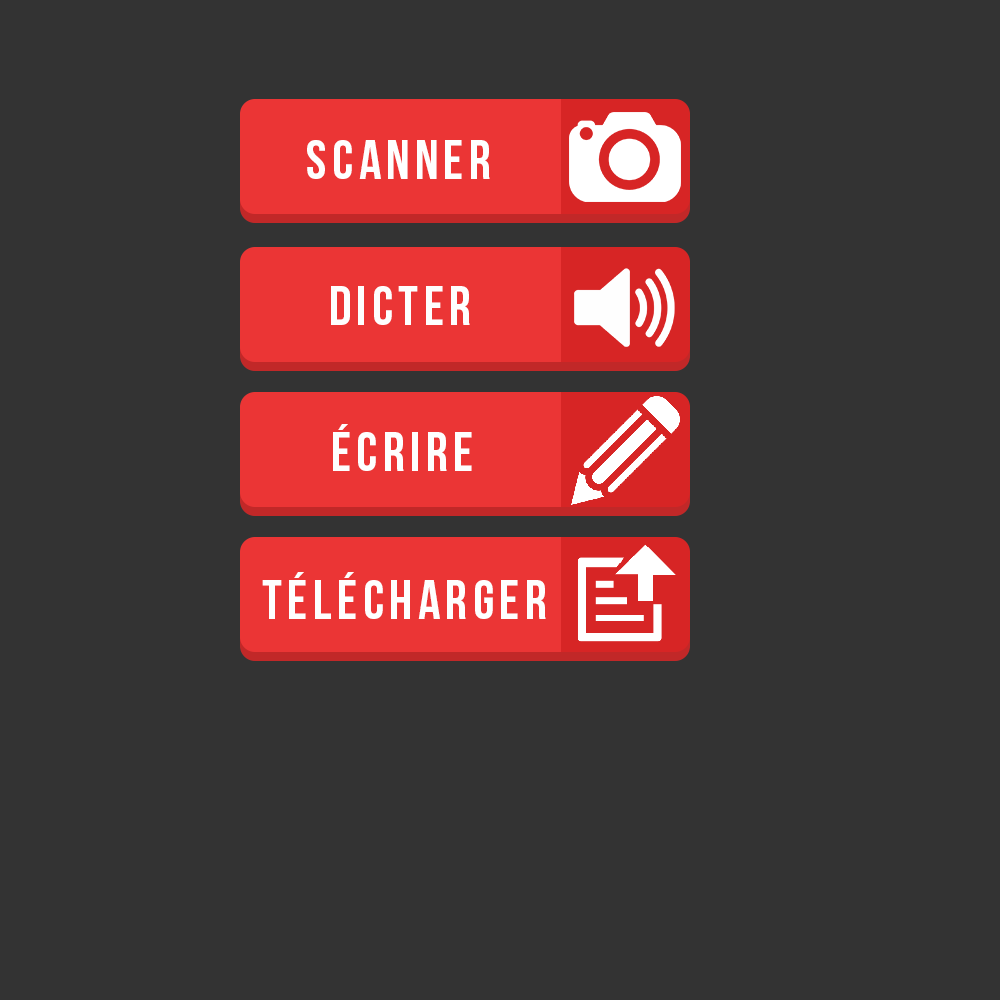
<style>
.page{position:relative;width:1000px;height:1000px;background:#333333}
.page>*{position:absolute;margin:0}
.t1{font:55px "BebasNeue";letter-spacing:0.1em;color:#fefefe;text-transform:uppercase}
</style>
<div class="page">
<p class="t1" style="left:307px;top:140px;width:183px;height:39px">Scanner</p>
<p class="t1" style="left:331px;top:286px;width:139px;height:39px">dicter</p>
<p class="t1" style="left:333px;top:424px;width:139px;height:47px">Écrire</p>
<p class="t1" style="left:262px;top:572px;width:284px;height:47px">tÉlÉcharger</p>
</div>
